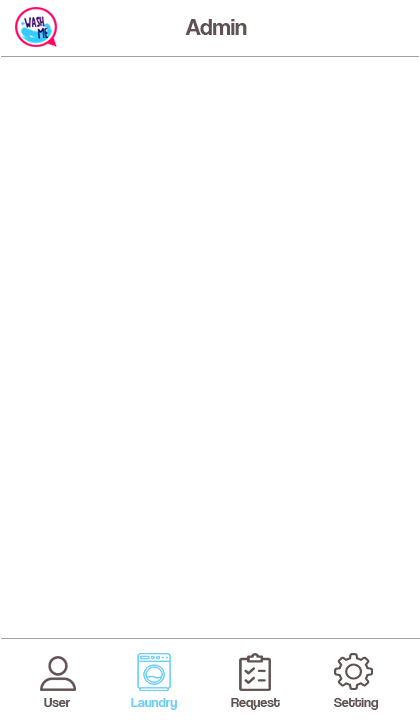
<style>
.page{position:relative;width:420px;height:720px;background:#ffffff}
.page>*{position:absolute;margin:0}
.t1{font:24px "CoolveticaRg-Regular";color:#605252}
.t2{font:14px "CoolveticaRg-Regular";color:#605252}
.t3{font:14px "CoolveticaRg-Regular";color:#6dcff6}
</style>
<div class="page">
<p class="t1" style="left:185px;top:19px;width:62px;height:16px">Admin</p>
<p class="t1" style="left:185px;top:19px;width:62px;height:16px">Admin</p>
<p class="t2" style="left:44px;top:698px;width:27px;height:9px">User</p>
<p class="t3" style="left:131px;top:698px;width:46px;height:12px">Laundry</p>
<p class="t2" style="left:231px;top:698px;width:49px;height:12px">Request</p>
<p class="t2" style="left:334px;top:698px;width:45px;height:12px">Setting</p>
</div>
